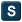
<style>
.page{position:relative;width:22px;height:22px;background:#0c3c54}
.page>*{position:absolute;margin:0}
.t1{font:14px "Arial-BoldMT";color:#f4f7f8}
</style>
<div class="page">
<p class="t1" style="left:7px;top:5px;width:9px;height:12px">S</p>
</div>
